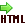
<style>
.page{position:relative;width:25px;height:25px;background:#ffffff}
.page>*{position:absolute;margin:0}
.t1{font:18.2px "Verdana-Bold";color:#360303;scale:0.77 1}
</style>
<div class="page">
<p class="t1" style="left:1px;top:15px;width:24px;height:8px">HTML</p>
</div>
